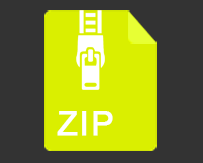
<style>
.page{position:relative;width:203px;height:163px;background:#333333}
.page>*{position:absolute;margin:0}
.t1{font:33.1px "ArialMT";letter-spacing:0.04em;color:#ffffff;font-weight:bold}
</style>
<div class="page">
<p class="t1" style="left:57px;top:111px;width:56px;height:25px">ZIP</p>
</div>
